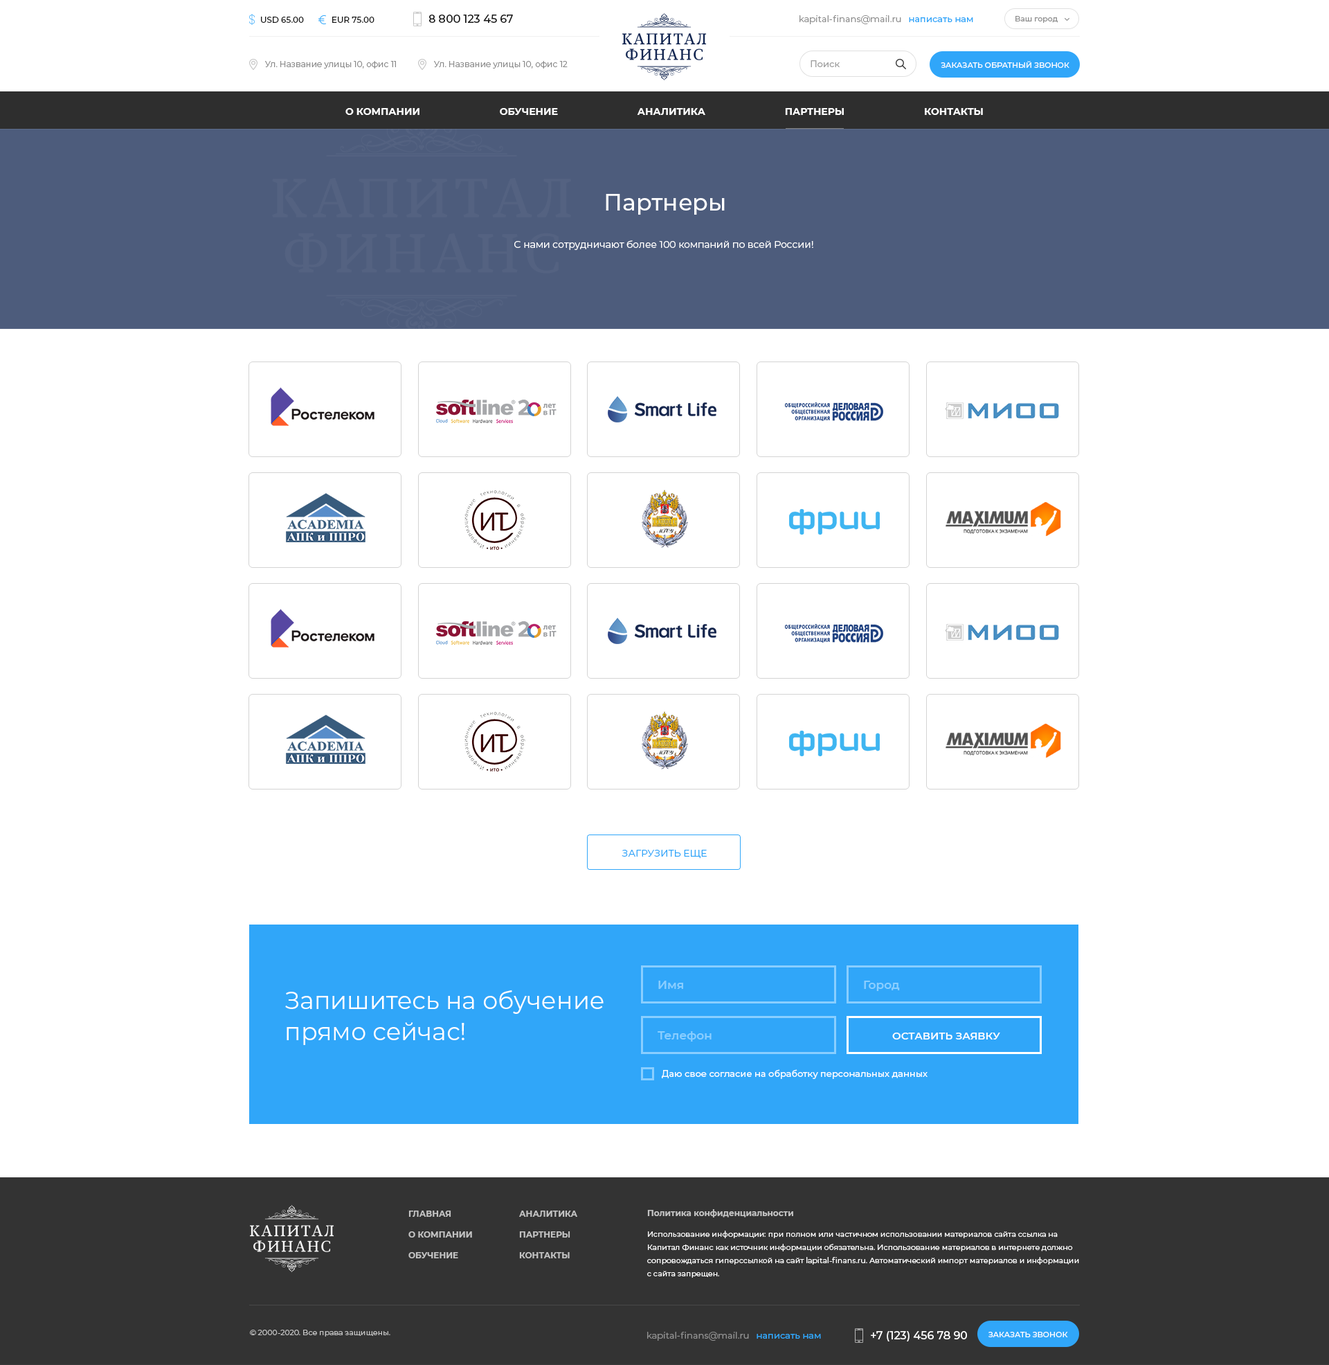
<style>
.page{position:relative;width:1329px;height:1365px;background:#ffffff}
.page>*{position:absolute;margin:0}
.t1{font:8.3px "Montserrat-Medium";color:#191919}
.t2{font:11.1px "Montserrat-Medium";color:#191919}
.t3{font:9px "Montserrat-Regular";color:#909090}
.t4{font:9px "Montserrat-Medium";color:#30a6f9}
.t5{font:7.6px "Montserrat-Medium";color:#909090}
.t6{font:8.3px "Montserrat-Regular";color:#8a8a8a}
.t7{font:9px "Montserrat-Medium";color:#a1a1a1}
.t8{font:7.6px "Montserrat-Medium";color:#ffffff}
.t9{font:9.7px "Montserrat-Bold";color:#ffffff}
.t10{font:22.8px "Montserrat-Medium";color:#ffffff}
.t11{font:9.7px "Montserrat-Regular";color:#ffffff}
.t12{font:9.7px "Montserrat-Regular";color:#30a6f9}
.t13{font:24.2px/31.2px "Montserrat-Regular";color:#ffffff}
.t14{font:11.8px "Montserrat-SemiBold";color:#89ceff}
.t15{font:10.4px "Montserrat-SemiBold";color:#ffffff}
.t16{font:9px "Montserrat-Medium";color:#ffffff}
.t17{font:8.3px/20.8px "Montserrat-Bold";color:#c3c3c3}
.t18{font:7.6px/13.2px "Montserrat-Regular";color:#ffffff}
.t19{font:7.6px/20.8px "Montserrat-Regular";color:#ffffff}
.t20{font:7.6px "Montserrat-Regular";color:#c3c3c3}
.t21{font:11.1px "Montserrat-Medium";color:#ffffff}
</style>
<div class="page">
<p class="t1" style="left:261px;top:17px;width:43px;height:6px">USD 65.00</p>
<p class="t1" style="left:332px;top:17px;width:43px;height:6px">EUR 75.00</p>
<p class="t2" style="left:429px;top:15px;width:84px;height:8px">8 800 123 45 67</p>
<p class="t3" style="left:800px;top:15px;width:173px;height:9px">kapital-finans@mail.ru   <span class="t4">написать нам</span></p>
<p class="t5" style="left:1016px;top:16px;width:42px;height:7px">Ваш город</p>
<p class="t6" style="left:265px;top:61px;width:131px;height:8px">Ул. Название улицы 10, офис 11</p>
<p class="t6" style="left:434px;top:61px;width:134px;height:8px">Ул. Название улицы 10, офис 12</p>
<p class="t7" style="left:811px;top:60px;width:29px;height:7px">Поиск</p>
<p class="t8" style="left:941px;top:61px;width:129px;height:7px">ЗАКАЗАТЬ ОБРАТНЫЙ ЗВОНОК</p>
<p class="t9" style="left:345px;top:108px;width:638px;height:7px">О КОМПАНИИ                             ОБУЧЕНИЕ                             АНАЛИТИКА                             ПАРТНЕРЫ                             КОНТАКТЫ</p>
<p class="t10" style="left:606px;top:194px;width:119px;height:21px">Партнеры</p>
<p class="t11" style="left:514px;top:240px;width:299px;height:10px">С нами сотрудничают более 100 компаний по всей России!</p>
<p class="t12" style="left:622px;top:849px;width:85px;height:9px">ЗАГРУЗИТЬ ЕЩЕ</p>
<p class="t13" style="left:285px;top:989px;width:319px;height:56px">Запишитесь на обучение<br>прямо сейчас!</p>
<p class="t14" style="left:658px;top:980px;width:25px;height:9px">Имя</p>
<p class="t14" style="left:864px;top:980px;width:36px;height:11px">Город</p>
<p class="t14" style="left:658px;top:1031px;width:54px;height:10px">Телефон</p>
<p class="t15" style="left:892px;top:1032px;width:108px;height:7px">ОСТАВИТЬ ЗАЯВКУ</p>
<p class="t16" style="left:662px;top:1069px;width:266px;height:10px">Даю свое согласие на обработку персональных данных</p>
<p class="t17" style="left:408px;top:1210px;width:64px;height:48px">ГЛАВНАЯ<br>О КОМПАНИИ<br>ОБУЧЕНИЕ</p>
<p class="t17" style="left:519px;top:1210px;width:58px;height:48px">АНАЛИТИКА<br>ПАРТНЕРЫ<br>КОНТАКТЫ</p>
<p class="t18" style="left:647px;top:1209px;width:432px;height:68px"><span class="t17">Политика конфиденциальности <br></span><span class="t19">Использование информации: при полном или частичном использовании материалов сайта ссылка на<br></span>Капитал Финанс как источник информации обязательна. Использование материалов в интернете должно<br>сопровождаться гиперссылкой на сайт lapital-finans.ru. Автоматический импорт материалов и информации<br>с сайта запрещен.</p>
<p class="t20" style="left:250px;top:1329px;width:140px;height:7px">© 2000-2020. Все права защищены.</p>
<p class="t3" style="left:647px;top:1331px;width:174px;height:9px">kapital-finans@mail.ru   <span class="t4">написать нам</span></p>
<p class="t21" style="left:871px;top:1331px;width:96px;height:10px">+7 (123) 456 78 90</p>
<p class="t8" style="left:989px;top:1331px;width:79px;height:6px">ЗАКАЗАТЬ ЗВОНОК</p>
</div>
